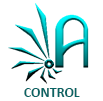
<style>
.page{position:relative;width:103px;height:101px;background:#ffffff}
.page>*{position:absolute;margin:0}
.t1{font:14px "Calibri-Bold";color:#0a6464}
</style>
<div class="page">
<p class="t1" style="left:24px;top:88px;width:56px;height:9px">CONTROL</p>
</div>
